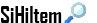
<style>
.page{position:relative;width:97px;height:23px;background:#ffffff}
.page>*{position:absolute;margin:0}
.t1{font:22px "AgencyFB-Bold";color:#000000}
</style>
<div class="page">
<p class="t1" style="left:1px;top:6px;width:61px;height:17px">SiHiltem</p>
</div>
